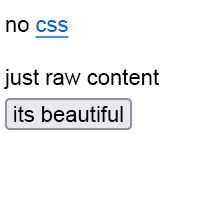
<style>
.page{position:relative;width:200px;height:200px;background:#ffffff}
.page>*{position:absolute;margin:0}
.t1{font:22px "ArialMT";color:#000000}
.t2{font:22px "ArialMT";color:#0066cc;text-decoration:underline}
</style>
<div class="page">
<p class="t1" style="left:4px;top:20px;width:155px;height:69px">no <span class="t2">css<br></span><br>just raw content</p>
<p class="t1" style="left:14px;top:106px;width:109px;height:16px">its beautiful</p>
</div>
